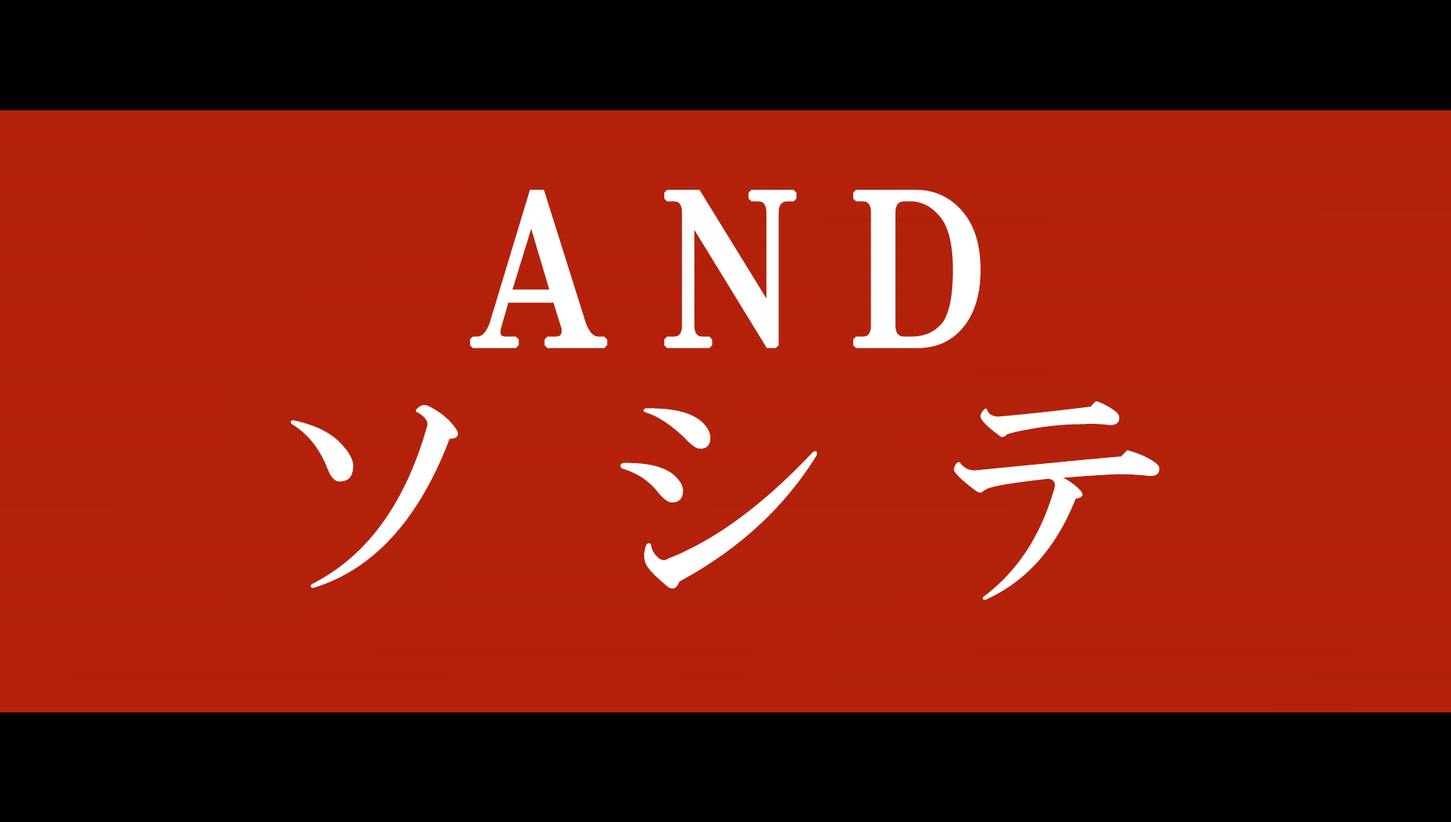
<style>
.page{position:relative;width:1451px;height:822px;background:#000000}
.page>*{position:absolute;margin:0}
.t1{font:207.5px "HGPMinchoB";letter-spacing:0.2em;color:#ffffff;font-weight:bold}
.t2{font:233px "HGMinchoB";letter-spacing:0.47em;color:#ffffff}
</style>
<div class="page">
<p class="t1" style="left:470px;top:190px;width:511px;height:158px">AND</p>
<p class="t2" style="left:290px;top:401px;width:869px;height:199px">ソシテ</p>
</div>
